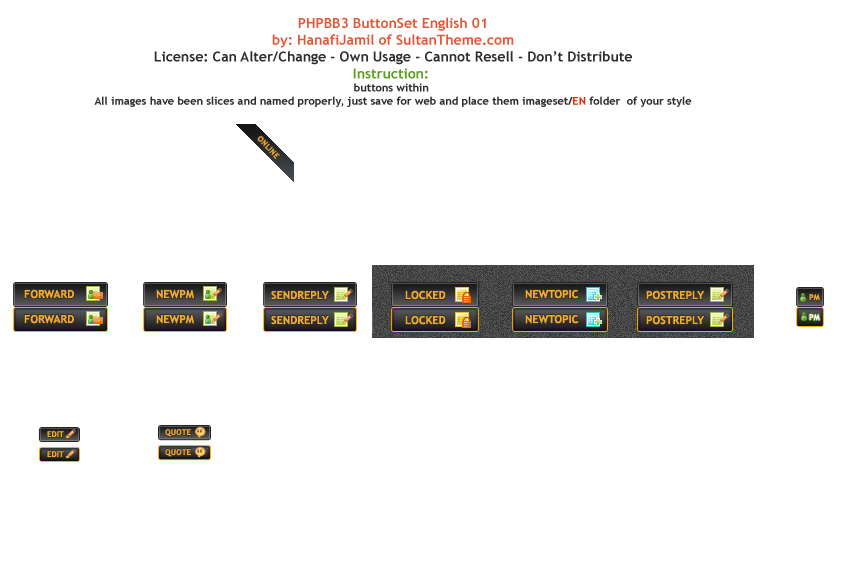
<style>
.page{position:relative;width:868px;height:565px;background:#ffffff}
.page>*{position:absolute;margin:0}
.t1{font:11px "TrebuchetMS-Bold";color:#2f2d2c}
.t2{font:14px "TrebuchetMS-Bold";color:#e65635}
.t3{font:14px "TrebuchetMS-Bold";color:#2f2d2c}
.t4{font:14px "TrebuchetMS-Bold";color:#5b9e1f}
.t5{font:11px "TrebuchetMS-Bold";color:#e02f08}
.t6{font:8px "TrebuchetMS-Bold";color:#f4ac2a}
.t7{font:11px "TrebuchetMS-Bold";color:#f4ac2a}
.t8{font:8px "TrebuchetMS-Bold";color:#fefffb}
</style>
<div class="page">
<p class="t1" style="left:94px;top:17px;width:598px;height:90px;text-align:center"><span class="t2">PHPBB3 ButtonSet English 01<br>by: HanafiJamil of SultanTheme.com<br></span><span class="t3">License: Can Alter/Change - Own Usage - Cannot Resell - Don’t Distribute<br></span><span class="t4">Instruction: <br></span>buttons within <br>All images have been slices and named properly, just save for web and place them imageset/<span class="t5">EN</span> folder  of your style</p>
<p class="t6" style="left:257px;top:136px;width:23px;height:23px;rotate:45deg">ONLINE</p>
<p class="t7" style="left:24px;top:289px;width:50px;height:10px">FORWARD</p>
<p class="t7" style="left:156px;top:290px;width:38px;height:9px">NEWPM</p>
<p class="t7" style="left:271px;top:290px;width:58px;height:10px">SENDREPLY</p>
<p class="t7" style="left:405px;top:290px;width:41px;height:10px">LOCKED</p>
<p class="t7" style="left:525px;top:289px;width:54px;height:10px">NEWTOPIC</p>
<p class="t7" style="left:646px;top:290px;width:58px;height:10px">POSTREPLY</p>
<p class="t6" style="left:809px;top:294px;width:11px;height:7px">PM</p>
<p class="t6" style="left:809px;top:294px;width:11px;height:7px">PM</p>
<p class="t7" style="left:24px;top:314px;width:50px;height:10px">FORWARD</p>
<p class="t7" style="left:156px;top:315px;width:38px;height:9px">NEWPM</p>
<p class="t7" style="left:271px;top:315px;width:58px;height:10px">SENDREPLY</p>
<p class="t7" style="left:405px;top:315px;width:41px;height:10px">LOCKED</p>
<p class="t7" style="left:525px;top:314px;width:54px;height:10px">NEWTOPIC</p>
<p class="t7" style="left:646px;top:315px;width:58px;height:10px">POSTREPLY</p>
<p class="t8" style="left:809px;top:314px;width:11px;height:7px">PM</p>
<p class="t6" style="left:47px;top:431px;width:17px;height:6px">EDIT</p>
<p class="t6" style="left:165px;top:429px;width:26px;height:8px">QUOTE</p>
<p class="t6" style="left:165px;top:449px;width:26px;height:8px">QUOTE</p>
<p class="t6" style="left:47px;top:451px;width:17px;height:6px">EDIT</p>
</div>
